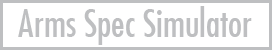
<style>
.page{position:relative;width:272px;height:50px;background:#ffffff}
.page>*{position:absolute;margin:0}
.t1{font:37.3px "FuturaCondensed";color:#bebfc1}
</style>
<div class="page">
<p class="t1" style="left:18px;top:6px;width:234px;height:39px">Arms Spec Simulator</p>
</div>
